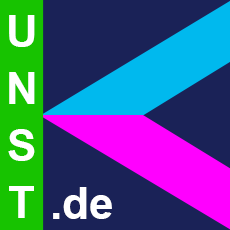
<style>
.page{position:relative;width:230px;height:230px;background:#1a2257}
.page>*{position:absolute;margin:0}
.t1{font:44px/57px "Arial-BoldMT";color:#ffffff}
.t2{font:44px "Arial-BoldMT";color:#ffffff}
</style>
<div class="page">
<p class="t1" style="left:8px;top:15px;width:27px;height:203px;text-align:center">U<br>N<br>S<br>T</p>
<p class="t2" style="left:53px;top:187px;width:59px;height:32px">.de</p>
</div>
